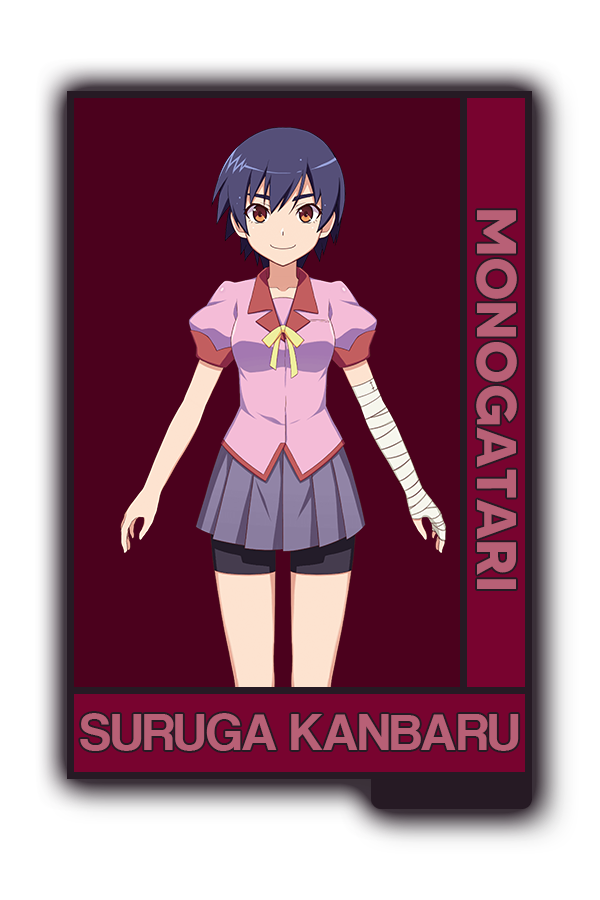
<style>
.page{position:relative;width:600px;height:900px;background:#4b011d}
.page>*{position:absolute;margin:0}
.t1{font:55.8px "MADETOMMY-Bold";color:#b86076}
.t2{font:54.5px "CoolveticaRg-Regular";color:#b86076}
</style>
<div class="page">
<p class="t1" style="left:476px;top:210px;width:41px;height:379px;rotate:90deg">MONOGATARI</p>
<p class="t2" style="left:80px;top:713px;width:439px;height:38px">SURUGA KANBARU</p>
</div>
